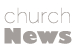
<style>
.page{position:relative;width:76px;height:52px;background:#ffffff}
.page>*{position:absolute;margin:0}
.t1{font:20.5px/20.5px "Raleway-Thin";letter-spacing:0.01em;color:#a2a2a2;scale:1.05 1}
.t2{font:20.5px/20.5px "GillSans-UltraBold";letter-spacing:0.01em;color:#a2a2a2;scale:1.05 1}
</style>
<div class="page">
<p class="t1" style="left:4px;top:7px;width:68px;height:37px;text-align:center">church<br><span class="t2">News</span></p>
</div>
